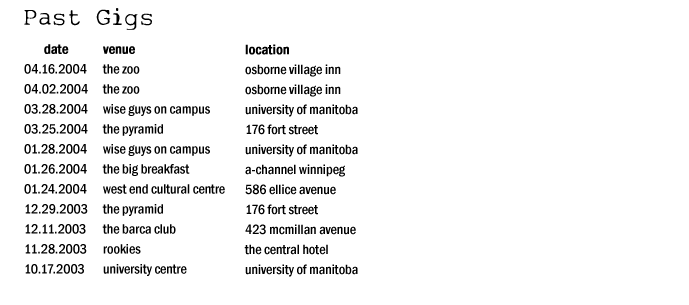
<style>
.page{position:relative;width:689px;height:305px;background:#ffffff}
.page>*{position:absolute;margin:0}
.t1{font:24px "My-type-of-font";color:#000000}
.t2{font:14px/20px "FranklinGothic-MediumCond";color:#000000}
.t3{font:14px/20px "FranklinGothic-MediumCond";color:#000000;font-weight:bold}
</style>
<div class="page">
<p class="t1" style="left:24px;top:8px;width:128px;height:22px">Past Gigs</p>
<p class="t2" style="left:24px;top:44px;width:64px;height:230px;text-align:center"><span class="t3">date<br></span>04.16.2004<br>04.02.2004<br>03.28.2004<br>03.25.2004<br>01.28.2004<br>01.26.2004<br>01.24.2004<br>12.29.2003<br>12.11.2003<br>11.28.2003<br>10.17.2003</p>
<p class="t2" style="left:102px;top:46px;width:123px;height:230px"><span class="t3">venue<br></span>the zoo<br>the zoo<br>wise guys on campus<br>the pyramid<br>wise guys on campus<br>the big breakfast<br>west end cultural centre<br>the pyramid<br>the barca club<br>rookies<br>university centre</p>
<p class="t2" style="left:244px;top:44px;width:114px;height:233px"><span class="t3">location<br></span>osborne village inn<br>osborne village inn<br>university of manitoba <br>176 fort street<br>university of manitoba <br>a-channel winnipeg<br>586 ellice avenue<br>176 fort street<br>423 mcmillan avenue <br>the central hotel<br>university of manitoba</p>
</div>
